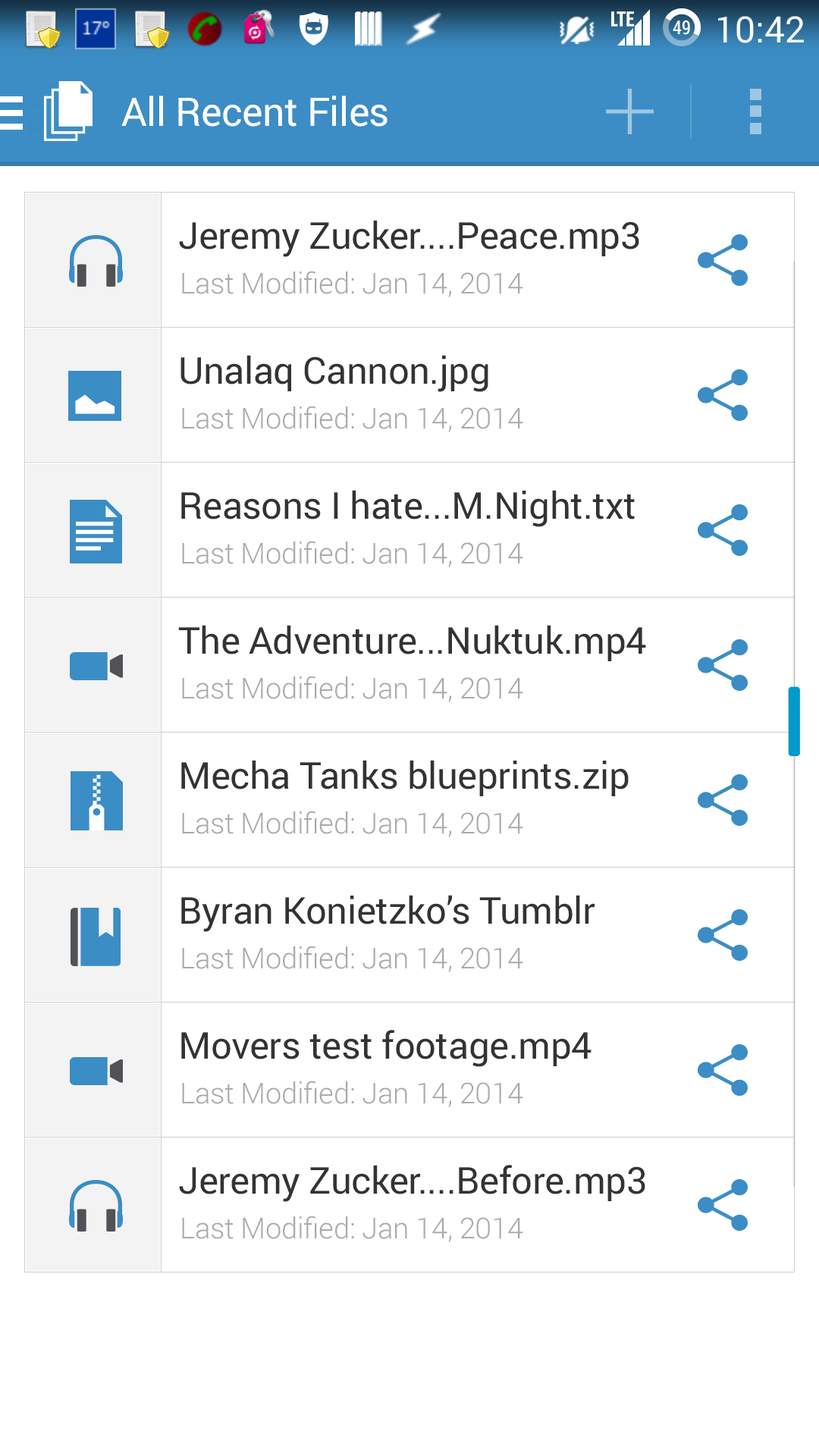
<style>
.page{position:relative;width:819px;height:1456px;background:#ffffff}
.page>*{position:absolute;margin:0}
.t1{font:39.4px "Roboto-Regular";letter-spacing:-0.01em;color:#ffffff}
.t2{font:37px "Roboto-Regular";letter-spacing:-0.01em;color:#333336}
.t3{font:28.8px "Roboto-Light";letter-spacing:-0.01em;color:#aaaaaa}
</style>
<div class="page">
<p class="t1" style="left:121px;top:96px;width:267px;height:31px">All Recent Files</p>
<p class="t2" style="left:179px;top:220px;width:460px;height:37px">Jeremy Zucker....Peace.mp3</p>
<p class="t3" style="left:182px;top:271px;width:341px;height:26px">Last Modified: Jan 14, 2014</p>
<p class="t2" style="left:180px;top:355px;width:308px;height:37px">Unalaq Cannon.jpg</p>
<p class="t3" style="left:182px;top:406px;width:341px;height:26px">Last Modified: Jan 14, 2014</p>
<p class="t2" style="left:181px;top:490px;width:454px;height:37px">Reasons I hate...M.Night.txt</p>
<p class="t3" style="left:182px;top:541px;width:341px;height:26px">Last Modified: Jan 14, 2014</p>
<p class="t2" style="left:178px;top:625px;width:468px;height:36px">The Adventure...Nuktuk.mp4</p>
<p class="t3" style="left:182px;top:676px;width:341px;height:26px">Last Modified: Jan 14, 2014</p>
<p class="t2" style="left:181px;top:760px;width:448px;height:36px">Mecha Tanks blueprints.zip</p>
<p class="t3" style="left:182px;top:811px;width:341px;height:26px">Last Modified: Jan 14, 2014</p>
<p class="t2" style="left:181px;top:895px;width:414px;height:37px">Byran Konietzko’s Tumblr</p>
<p class="t3" style="left:182px;top:946px;width:341px;height:26px">Last Modified: Jan 14, 2014</p>
<p class="t2" style="left:181px;top:1030px;width:410px;height:37px">Movers test footage.mp4</p>
<p class="t3" style="left:182px;top:1081px;width:341px;height:26px">Last Modified: Jan 14, 2014</p>
<p class="t2" style="left:179px;top:1165px;width:466px;height:37px">Jeremy Zucker....Before.mp3</p>
<p class="t3" style="left:182px;top:1216px;width:341px;height:26px">Last Modified: Jan 14, 2014</p>
</div>
